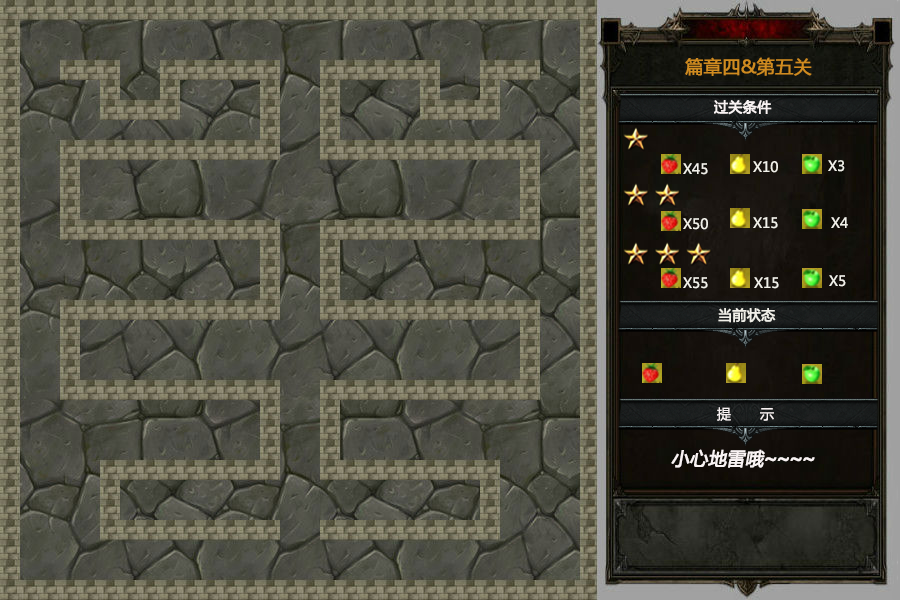
<style>
.page{position:relative;width:900px;height:600px}
.page>*{position:absolute;margin:0}
.t1{font:18px "MicrosoftYaHei";color:#cf8b20;font-weight:bold}
.t2{font:14px "MicrosoftYaHei";color:#f9f3f3;font-weight:bold}
.t3{font:14px "MicrosoftYaHei";color:#f1f0e9}
.t4{font:14px "MicrosoftYaHei";color:#f1f0e9;font-weight:bold}
.t5{font:14px "MicrosoftYaHei";color:#f9f3f3}
.t6{font:18px "MicrosoftYaHei";color:#f9f3f3;font-weight:bold;font-style:italic}
.t7{font:18px "AdobeHeitiStd-Regular";color:#f9f3f3;font-weight:bold;font-style:italic}
</style>
<div class="page">
<p class="t1" style="left:685px;top:57px;width:127px;height:19px">篇章四&amp;第五关</p>
<p class="t2" style="left:714px;top:100px;width:58px;height:15px">过关条件</p>
<p class="t3" style="left:753px;top:161px;width:25px;height:12px">X10</p>
<p class="t3" style="left:828px;top:160px;width:17px;height:12px">X3</p>
<p class="t3" style="left:683px;top:163px;width:25px;height:12px">X45</p>
<p class="t3" style="left:683px;top:218px;width:25px;height:12px">X50</p>
<p class="t3" style="left:753px;top:217px;width:25px;height:12px">X15</p>
<p class="t3" style="left:831px;top:217px;width:17px;height:11px">X4</p>
<p class="t3" style="left:683px;top:277px;width:25px;height:12px">X55</p>
<p class="t3" style="left:754px;top:277px;width:25px;height:12px">X15</p>
<p class="t3" style="left:829px;top:275px;width:17px;height:12px">X5</p>
<p class="t4" style="left:718px;top:308px;width:58px;height:15px">当前状态</p>
<p class="t5" style="left:717px;top:407px;width:57px;height:14px">提       示</p>
<p class="t6" style="left:671px;top:449px;width:144px;height:19px">小心地雷哦<span class="t7">~~~~</span></p>
</div>
